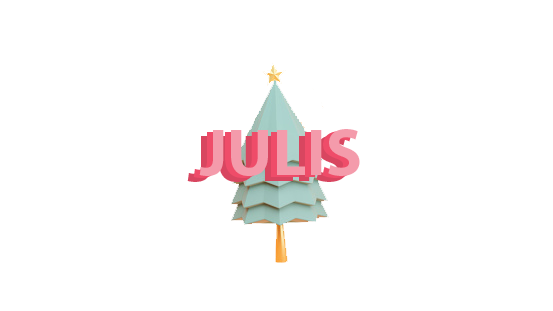
<style>
.page{position:relative;width:553px;height:311px;background:#ffffff}
.page>*{position:absolute;margin:0}
.t1{font:66.7px "MyriadPro-Bold";color:#d84660}
.t2{font:66.7px "MyriadPro-Bold"}
.t3{font:66.7px "MyriadPro-Bold";color:#f49bab}
</style>
<div class="page">
<p class="t1" style="left:187px;top:135px;width:161px;height:47px">JULIS</p>
<p class="t2" style="left:193px;top:131px;width:161px;height:47px">JULIS</p>
<p class="t3" style="left:199px;top:129px;width:161px;height:47px">JULIS</p>
</div>
